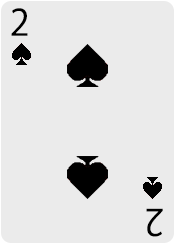
<style>
.page{position:relative;width:175px;height:244px;background:#ebebeb}
.page>*{position:absolute;margin:0}
.t1{font:36px "KozGoPr6N-Regular";color:#000000}
</style>
<div class="page">
<p class="t1" style="left:11px;top:8px;width:17px;height:28px">2</p>
<p class="t1" style="left:146px;top:208px;width:17px;height:29px;rotate:-180deg">2</p>
</div>
